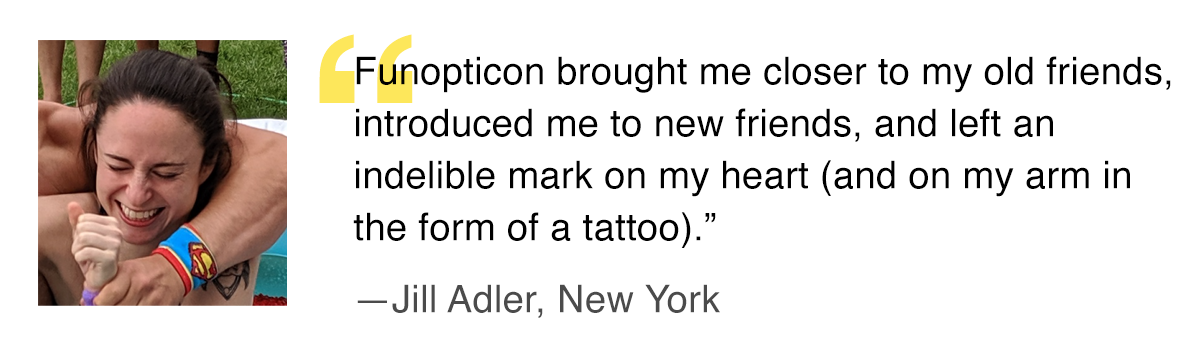
<style>
.page{position:relative;width:1200px;height:350px;background:#ffffff}
.page>*{position:absolute;margin:0}
.t1{font:249.3px "Helvetica-Bold";letter-spacing:0.01em;color:#fde75b}
.t2{font:38px/52px "Helvetica";letter-spacing:0.01em;color:#000000}
.t3{font:38px/72px "Helvetica";letter-spacing:0.01em;color:#4b4b4b}
</style>
<div class="page">
<p class="t1" style="left:319px;top:34px;width:94px;height:69px">“</p>
<p class="t2" style="left:353px;top:56px;width:818px;height:262px">Funopticon brought me closer to my old friends, introduced me to new friends, and left an indelible mark on my heart (and on my arm in the form of a tattoo).”<br><span class="t3">—Jill Adler, New York</span></p>
</div>
